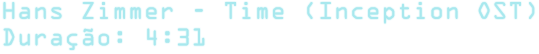
<style>
.page{position:relative;width:539px;height:54px;background:#ffffff}
.page>*{position:absolute;margin:0}
.t1{font:22px "OCRAStd";color:#a8e8ee}
</style>
<div class="page">
<p class="t1" style="left:3px;top:2px;width:532px;height:48px">Hans Zimmer - Time (Inception OST)<br>Duração: 4:31</p>
</div>
